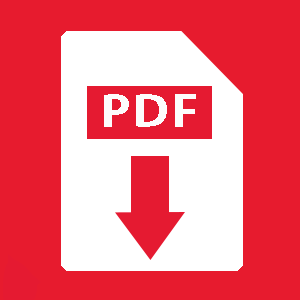
<style>
.page{position:relative;width:300px;height:300px;background:#e71b2e}
.page>*{position:absolute;margin:0}
.t1{font:48px "MyriadPro-Bold";letter-spacing:0.06em;color:#fdfcfc;scale:1.07 1}
</style>
<div class="page">
<p class="t1" style="left:104px;top:94px;width:92px;height:33px">PDF</p>
</div>
